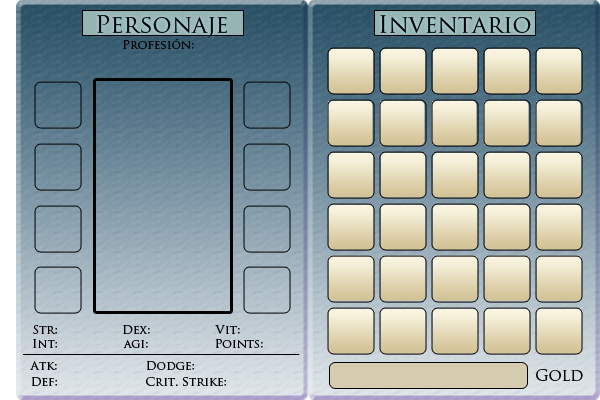
<style>
.page{position:relative;width:600px;height:400px}
.page>*{position:absolute;margin:0}
.t1{font:24px "TrajanPro-Regular";color:#000000}
.t2{font:12px "TrajanPro-Regular";color:#000000}
.t3{font:16px "TrajanPro-Regular";color:#000000}
</style>
<div class="page">
<p class="t1" style="left:97px;top:15px;width:131px;height:23px">Personaje</p>
<p class="t1" style="left:380px;top:15px;width:151px;height:18px">Inventario</p>
<p class="t2" style="left:33px;top:325px;width:24px;height:9px">Str:</p>
<p class="t2" style="left:123px;top:325px;width:27px;height:9px">Dex:</p>
<p class="t2" style="left:215px;top:325px;width:25px;height:9px">Vit:</p>
<p class="t2" style="left:33px;top:339px;width:24px;height:9px">Int:</p>
<p class="t2" style="left:123px;top:340px;width:25px;height:8px">agi:</p>
<p class="t2" style="left:215px;top:339px;width:48px;height:9px">Points:</p>
<p class="t2" style="left:23px;top:354px;width:277px;height:1px">______________________________________________</p>
<p class="t2" style="left:30px;top:361px;width:27px;height:9px">Atk:</p>
<p class="t2" style="left:146px;top:361px;width:48px;height:9px">Dodge:</p>
<p class="t2" style="left:31px;top:377px;width:26px;height:9px">Def:</p>
<p class="t2" style="left:146px;top:377px;width:80px;height:9px">Crit. Strike:</p>
<p class="t3" style="left:536px;top:369px;width:47px;height:12px">Gold</p>
</div>
